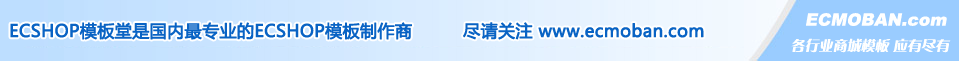
<style>
.page{position:relative;width:959px;height:61px}
.page>*{position:absolute;margin:0}
.t1{font:17px "Arial-Black";color:#ffffff;font-style:italic}
.t2{font:17px "MicrosoftYaHei";color:#0963c4;font-weight:bold}
.t3{font:14px "FZCQJW--GB1-0";color:#ffffff;font-style:italic}
</style>
<div class="page">
<p class="t1" style="left:806px;top:13px;width:141px;height:13px">ECMOBAN.com</p>
<p class="t2" style="left:10px;top:22px;width:402px;height:18px">ECSHOP模板堂是国内最专业的ECSHOP模板制作商</p>
<p class="t2" style="left:463px;top:22px;width:241px;height:18px">尽请关注 www.ecmoban.com</p>
<p class="t3" style="left:791px;top:38px;width:160px;height:15px">各行业商城模板 应有尽有</p>
</div>
